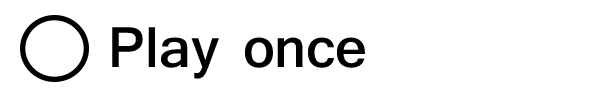
<style>
.page{position:relative;width:600px;height:100px;background:#ffffff}
.page>*{position:absolute;margin:0}
.t1{font:60px "Shruti-Bold";color:#000000}
</style>
<div class="page">
<p class="t1" style="left:112px;top:27px;width:253px;height:52px">Play once</p>
</div>
